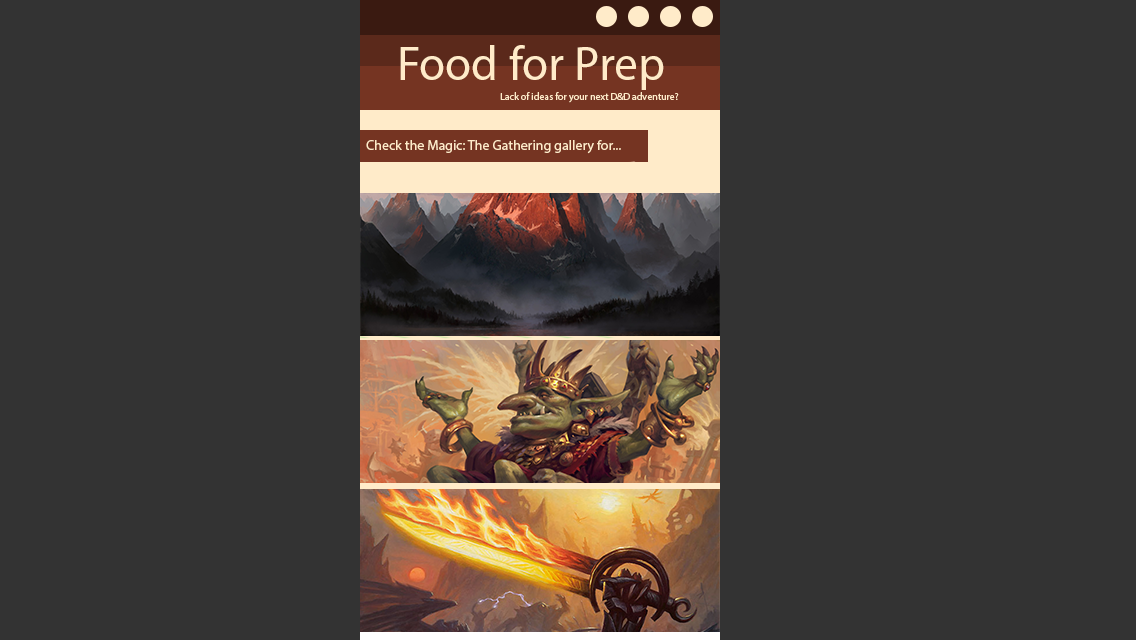
<style>
.page{position:relative;width:1136px;height:640px;background:#333333}
.page>*{position:absolute;margin:0}
.t1{font:48px "MyriadPro-Regular";color:#ffebc9}
.t2{font:10px "MyriadPro-Regular";color:#ffebc9}
.t3{font:14px "MyriadPro-Regular";color:#ffebc9}
</style>
<div class="page">
<p class="t1" style="left:400px;top:45px;width:264px;height:45px">Food for Prep</p>
<p class="t2" style="left:500px;top:92px;width:179px;height:11px">Lack of ideas for your next D&amp;D adventure?</p>
<p class="t3" style="left:366px;top:140px;width:255px;height:14px">Check the Magic: The Gathering gallery for...</p>
</div>
